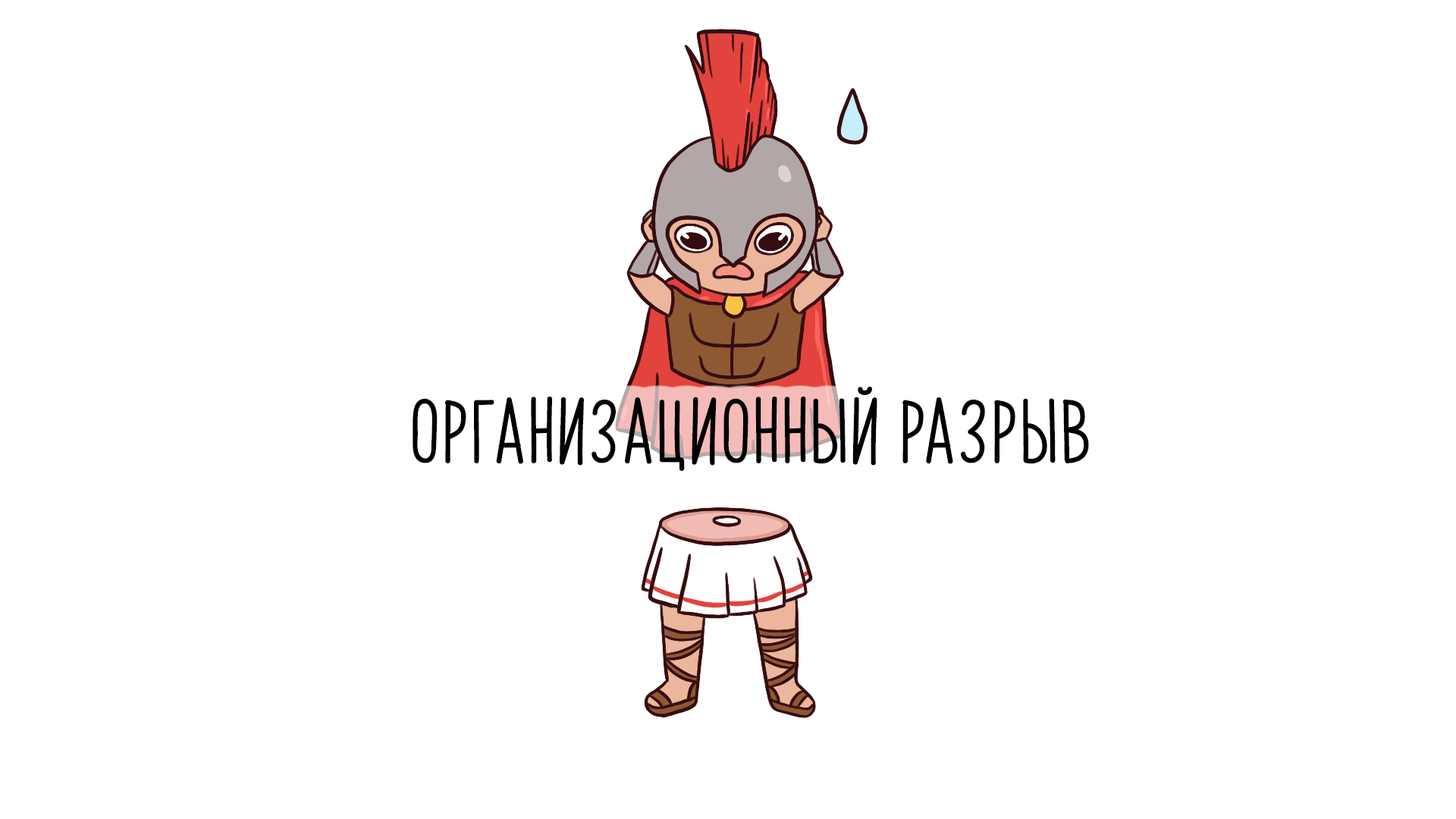
<style>
.page{position:relative;width:1456px;height:819px;background:#ffffff}
.page>*{position:absolute;margin:0}
.t1{font:54.6px "PapayaSunrise";color:#000000;font-weight:bold}
</style>
<div class="page">
<p class="t1" style="left:413px;top:386px;width:676px;height:85px">организационный разрыв</p>
</div>
